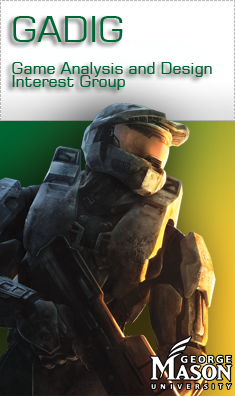
<style>
.page{position:relative;width:235px;height:396px}
.page>*{position:absolute;margin:0}
.t1{font:16px/13px "Square721BT-Roman";color:#006633}
.t2{font:36px/13px "Square721BT-Roman";color:#006633}
</style>
<div class="page">
<p class="t1" style="left:12px;top:16px;width:200px;height:74px"><span class="t2">GADIG<br><br></span>Game Analysis and Design Interest Group</p>
</div>
